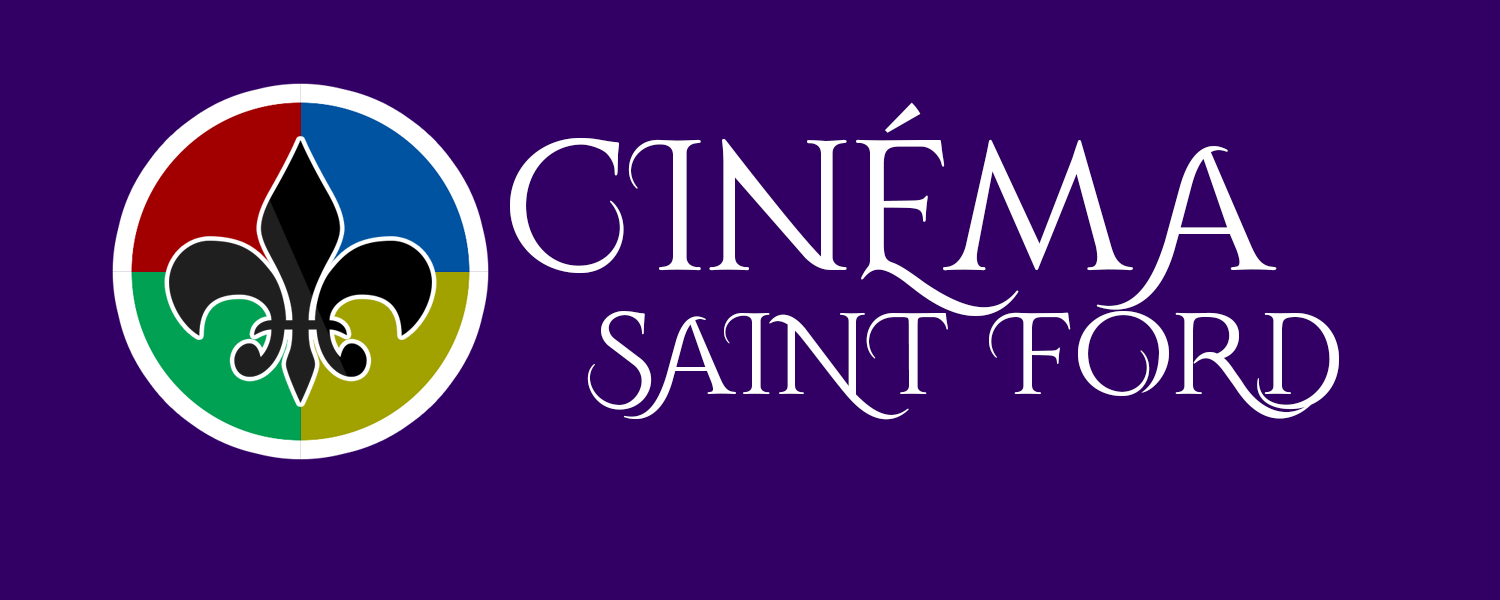
<style>
.page{position:relative;width:1500px;height:600px;background:#320064}
.page>*{position:absolute;margin:0}
.t1{font:150px/140px "QardoosPersonalUse-Regular";color:#ffffff}
.t2{font:240px/140px "QardoosPersonalUse-Regular";color:#ffffff}
</style>
<div class="page">
<p class="t1" style="left:510px;top:102px;width:829px;height:318px;text-align:center"><span class="t2">CInÉmA<br>   </span>SAINT FORD</p>
</div>
